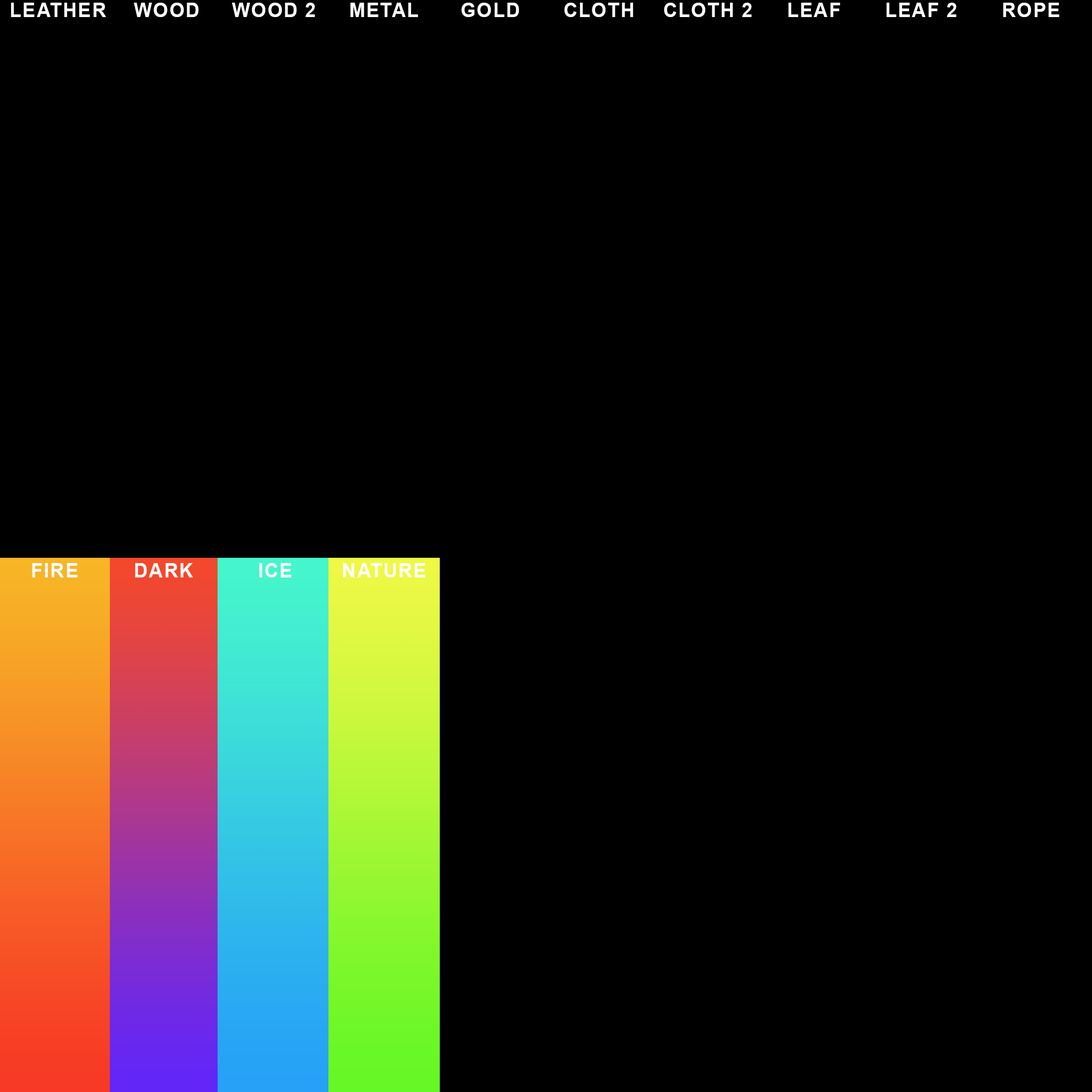
<style>
.page{position:relative;width:1092px;height:1092px;background:#000000}
.page>*{position:absolute;margin:0}
.t1{font:19.6px "Arial-BoldMT";letter-spacing:0.05em;color:#ffffff}
</style>
<div class="page">
<p class="t1" style="left:11px;top:3px;width:95px;height:14px">LEATHER</p>
<p class="t1" style="left:134px;top:3px;width:65px;height:14px">WOOD</p>
<p class="t1" style="left:232px;top:3px;width:83px;height:14px">WOOD 2</p>
<p class="t1" style="left:350px;top:3px;width:68px;height:14px">METAL</p>
<p class="t1" style="left:461px;top:3px;width:58px;height:14px">GOLD</p>
<p class="t1" style="left:564px;top:3px;width:69px;height:14px">CLOTH</p>
<p class="t1" style="left:664px;top:3px;width:88px;height:14px">CLOTH 2</p>
<p class="t1" style="left:788px;top:3px;width:52px;height:14px">LEAF</p>
<p class="t1" style="left:886px;top:3px;width:71px;height:14px">LEAF 2</p>
<p class="t1" style="left:1003px;top:3px;width:56px;height:14px">ROPE</p>
<p class="t1" style="left:32px;top:563px;width:46px;height:14px">FIRE</p>
<p class="t1" style="left:135px;top:563px;width:58px;height:14px">DARK</p>
<p class="t1" style="left:259px;top:563px;width:33px;height:14px">ICE</p>
<p class="t1" style="left:343px;top:563px;width:82px;height:14px">NATURE</p>
</div>
